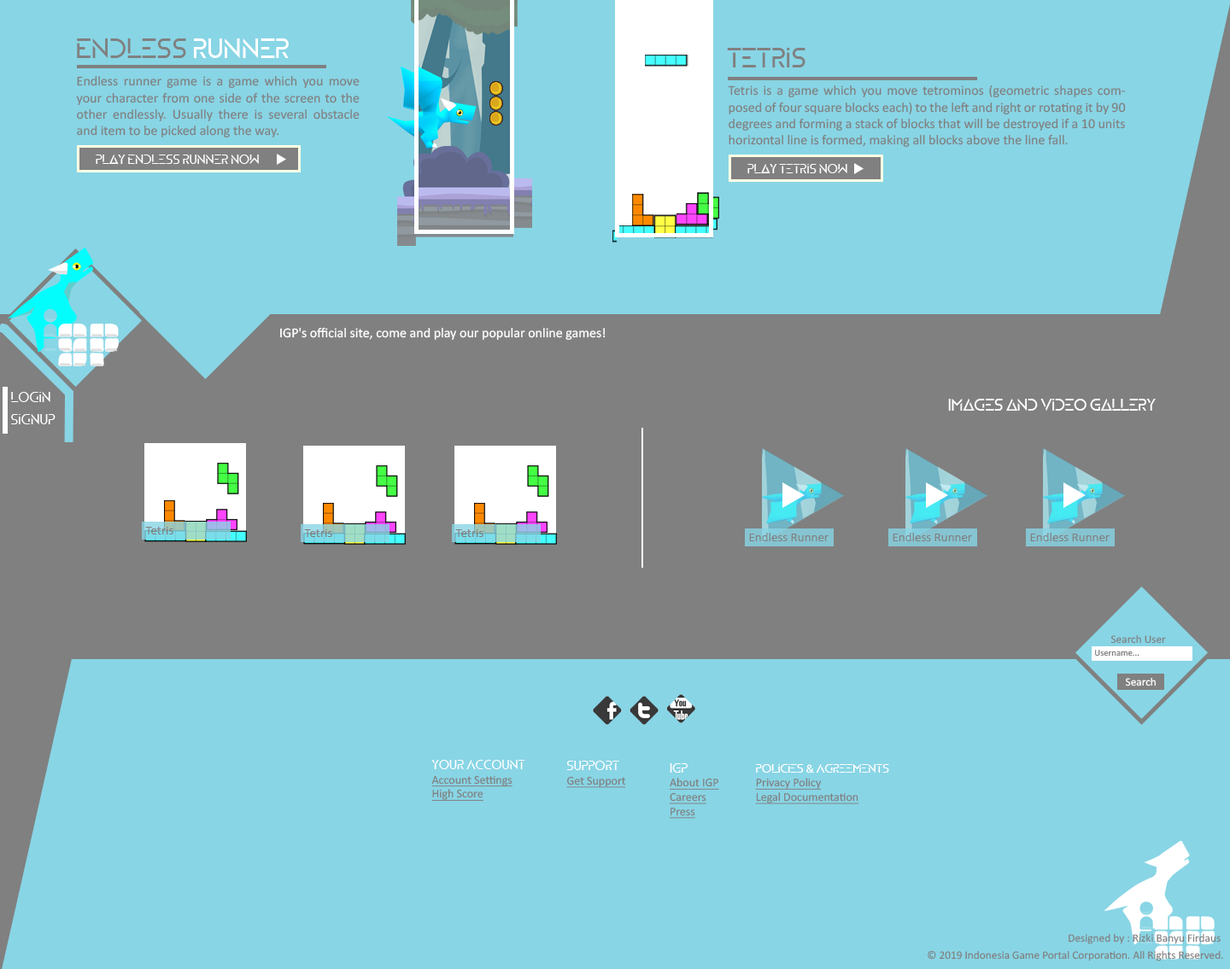
<style>
.page{position:relative;width:1230px;height:969px;background:#88d5e5}
.page>*{position:absolute;margin:0}
.t1{font:27.3px "ZELDA";color:#808080}
.t2{font:27.3px "ZELDA";color:#ffffff}
.t3{font:13.6px "Calibri";color:#808080}
.t4{font:12.8px "ZELDA";color:#ffffff}
.t5{font:13.6px "Calibri";color:#ffffff}
.t6{font:13.6px "ZELDA";color:#ffffff}
.t7{font:15.9px "ZELDA";color:#ffffff}
.t8{font:12.8px "Calibri";color:#808080}
.t9{font:11.4px "Calibri";color:#808080}
.t10{font:9.1px "Calibri";color:#808080}
.t11{font:11.4px "Calibri";color:#ffffff}
.t12{font:11.9px "Calibri";color:#808080;text-decoration:underline}
.t13{font:13px "ZELDA";color:#ffffff}
.t14{font:11.9px "ZELDA";color:#ffffff}
.t15{font:11.9px "Calibri";color:#ffffff}
</style>
<div class="page">
<p class="t1" style="left:77px;top:38px;width:212px;height:20px">Endless <span class="t2">Runner</span></p>
<p class="t1" style="left:727px;top:48px;width:78px;height:19px">Tetris</p>
<p class="t3" style="left:76px;top:75px;width:284px;height:63px;text-align:justify">Endless runner game is a game which you move your character from one side of the screen to the other endlessly. Usually there is several obstacle and item to be picked along the way.</p>
<p class="t3" style="left:728px;top:85px;width:398px;height:62px;text-align:justify">Tetris is a game which you move tetrominos (geometric shapes composed of four square blocks each) to the left and right or rotating it by 90 degrees and forming a stack of blocks that will be destroyed if a 10 units horizontal line is formed, making all blocks above the line fall.</p>
<p class="t4" style="left:96px;top:155px;width:163px;height:9px">Play Endless Runner Now</p>
<p class="t4" style="left:747px;top:164px;width:100px;height:9px">Play Tetris Now</p>
<p class="t5" style="left:280px;top:327px;width:326px;height:13px">IGP's official site, come and play our popular online games!</p>
<p class="t6" style="left:11px;top:392px;width:39px;height:10px">Login</p>
<p class="t7" style="left:948px;top:399px;width:208px;height:12px">Images and Video Gallery</p>
<p class="t6" style="left:11px;top:414px;width:45px;height:11px">SignUp</p>
<p class="t8" style="left:145px;top:527px;width:28px;height:8px">Tetris</p>
<p class="t8" style="left:304px;top:530px;width:28px;height:7px">Tetris</p>
<p class="t8" style="left:455px;top:530px;width:28px;height:7px">Tetris</p>
<p class="t8" style="left:749px;top:533px;width:80px;height:9px">Endless Runner</p>
<p class="t8" style="left:893px;top:533px;width:79px;height:9px">Endless Runner</p>
<p class="t8" style="left:1030px;top:533px;width:80px;height:9px">Endless Runner</p>
<p class="t9" style="left:1110px;top:635px;width:56px;height:9px">Search User</p>
<p class="t10" style="left:1095px;top:650px;width:44px;height:7px">Username...</p>
<p class="t11" style="left:1125px;top:677px;width:31px;height:10px">Search</p>
<p class="t12" style="left:431px;top:760px;width:94px;height:41px;text-align:justify"><span class="t13">Your Account<br></span>Account Settings<br>High Score</p>
<p class="t12" style="left:566px;top:761px;width:60px;height:27px;text-align:justify"><span class="t13">Support<br></span>Get Support</p>
<p class="t12" style="left:669px;top:764px;width:50px;height:55px;text-align:justify"><span class="t13">IGP<br></span>About IGP<br>Careers<br>Press</p>
<p class="t12" style="left:755px;top:764px;width:134px;height:41px;text-align:justify"><span class="t14">Policies </span><span class="t15">&amp;</span><span class="t14"> Agreements<br></span>Privacy Policy<br>Legal Documentation</p>
<p class="t9" style="left:1069px;top:934px;width:152px;height:11px">Designed by : Rizki Banyu Firdaus</p>
<p class="t9" style="left:928px;top:951px;width:295px;height:11px">© 2019 Indonesia Game Portal Corporation. All Rights Reserved.</p>
</div>
